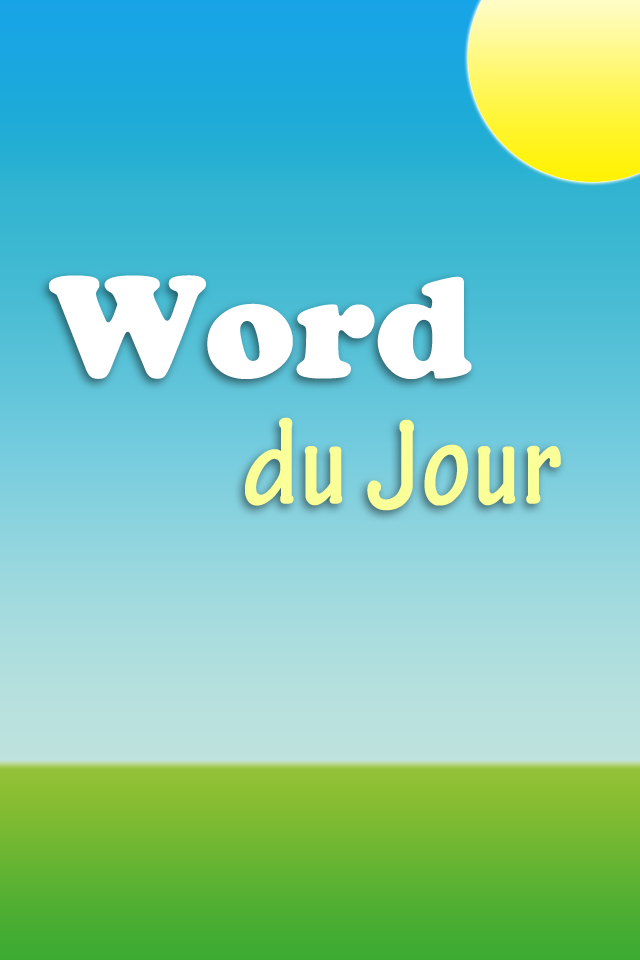
<style>
.page{position:relative;width:640px;height:960px}
.page>*{position:absolute;margin:0}
.t1{font:150px "CooperBlack";color:#ffffff}
.t2{font:130px "TektonPro-BoldCond";color:#fbff97}
</style>
<div class="page">
<p class="t1" style="left:49px;top:275px;width:423px;height:104px">Word</p>
<p class="t2" style="left:245px;top:417px;width:316px;height:94px">du Jour</p>
</div>
